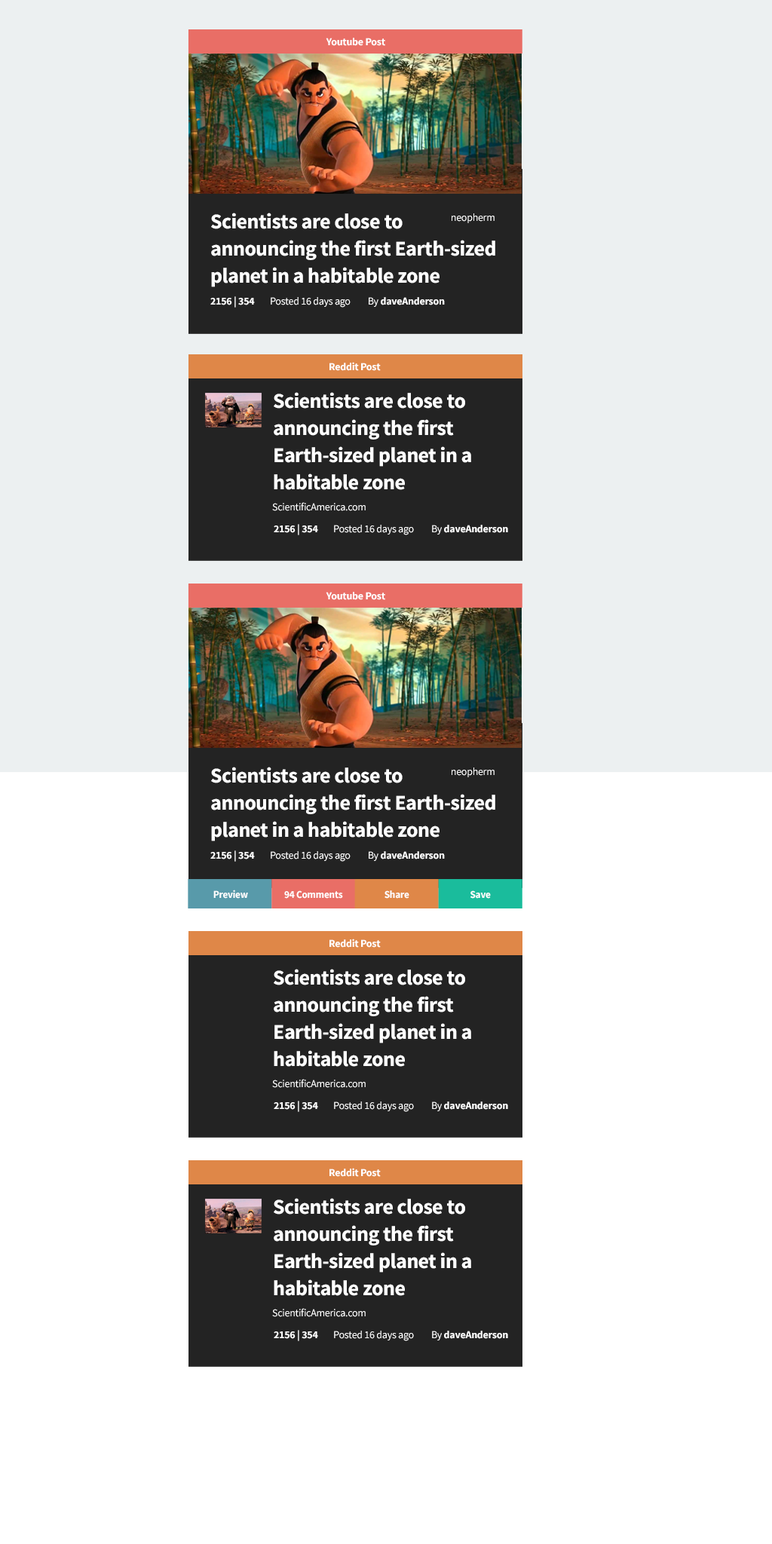
<style>
.page{position:relative;width:772px;height:1544px;background:#ffffff}
.page>*{position:absolute;margin:0}
.t1{font:10.6px "SourceSansPro-Bold";letter-spacing:-0.02em;color:#ffffff}
.t2{font:21.1px/27.1px "SourceSansPro-Bold";letter-spacing:-0.02em;color:#ffffff}
.t3{font:10.6px "SourceSansPro-Regular";letter-spacing:-0.02em;color:#ffffff}
.t4{font:10.6px "SourceSansPro-Bold";letter-spacing:-0.02em;color:#ffffff;scale:0.95 1}
</style>
<div class="page">
<p class="t1" style="left:326px;top:38px;width:59px;height:8px">Youtube Post</p>
<p class="t2" style="left:211px;top:213px;width:284px;height:74px">Scientists are close to                 announcing the first Earth-sized planet in a habitable zone</p>
<p class="t3" style="left:452px;top:213px;width:43px;height:10px">neopherm</p>
<p class="t1" style="left:210px;top:296px;width:45px;height:12px">2156 | 354</p>
<p class="t3" style="left:271px;top:297px;width:80px;height:11px">Posted 16 days ago</p>
<p class="t1" style="left:369px;top:297px;width:76px;height:10px"><span class="t3">By </span>daveAnderson</p>
<p class="t1" style="left:330px;top:362px;width:51px;height:9px">Reddit Post</p>
<p class="t2" style="left:274px;top:392px;width:197px;height:98px">Scientists are close to  announcing the first Earth-sized planet in a habitable zone</p>
<p class="t3" style="left:272px;top:502px;width:94px;height:9px">ScientificAmerica.com</p>
<p class="t1" style="left:274px;top:524px;width:44px;height:11px">2156 | 354</p>
<p class="t3" style="left:334px;top:525px;width:80px;height:10px">Posted 16 days ago</p>
<p class="t1" style="left:432px;top:525px;width:76px;height:10px"><span class="t3">By </span>daveAnderson</p>
<p class="t1" style="left:326px;top:592px;width:59px;height:8px">Youtube Post</p>
<p class="t2" style="left:211px;top:767px;width:284px;height:75px">Scientists are close to                 announcing the first Earth-sized planet in a habitable zone</p>
<p class="t3" style="left:452px;top:768px;width:43px;height:9px">neopherm</p>
<p class="t1" style="left:210px;top:851px;width:45px;height:11px">2156 | 354</p>
<p class="t3" style="left:271px;top:851px;width:80px;height:11px">Posted 16 days ago</p>
<p class="t1" style="left:369px;top:851px;width:76px;height:10px"><span class="t3">By </span>daveAnderson</p>
<p class="t4" style="left:213px;top:890px;width:35px;height:9px">Preview</p>
<p class="t4" style="left:284px;top:891px;width:59px;height:8px">94 Comments</p>
<p class="t4" style="left:385px;top:891px;width:24px;height:8px">Share</p>
<p class="t4" style="left:471px;top:891px;width:20px;height:8px">Save</p>
<p class="t1" style="left:330px;top:939px;width:51px;height:9px">Reddit Post</p>
<p class="t2" style="left:274px;top:969px;width:197px;height:98px">Scientists are close to  announcing the first Earth-sized planet in a habitable zone</p>
<p class="t3" style="left:272px;top:1079px;width:94px;height:9px">ScientificAmerica.com</p>
<p class="t1" style="left:274px;top:1101px;width:44px;height:11px">2156 | 354</p>
<p class="t3" style="left:334px;top:1102px;width:80px;height:10px">Posted 16 days ago</p>
<p class="t1" style="left:432px;top:1102px;width:76px;height:9px"><span class="t3">By </span>daveAnderson</p>
<p class="t1" style="left:330px;top:1168px;width:51px;height:9px">Reddit Post</p>
<p class="t2" style="left:274px;top:1198px;width:197px;height:98px">Scientists are close to  announcing the first Earth-sized planet in a habitable zone</p>
<p class="t3" style="left:272px;top:1308px;width:94px;height:9px">ScientificAmerica.com</p>
<p class="t1" style="left:274px;top:1330px;width:44px;height:11px">2156 | 354</p>
<p class="t3" style="left:334px;top:1331px;width:80px;height:10px">Posted 16 days ago</p>
<p class="t1" style="left:432px;top:1331px;width:76px;height:10px"><span class="t3">By </span>daveAnderson</p>
</div>
